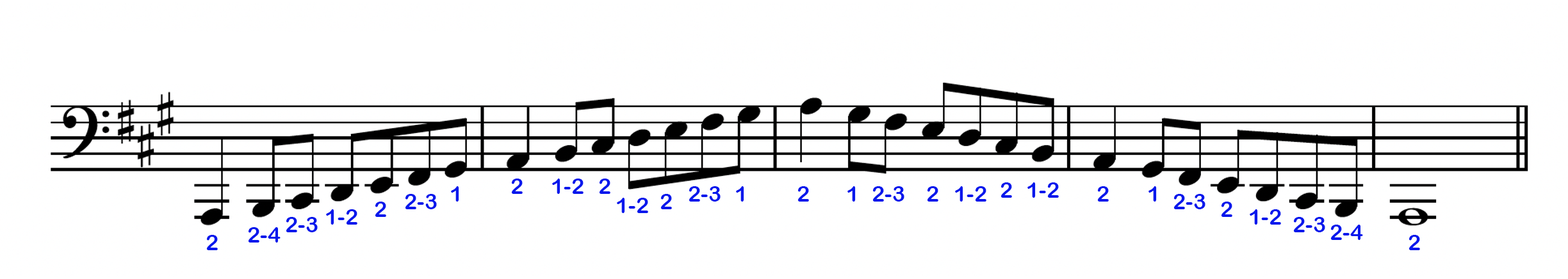
<style>
.page{position:relative;width:1568px;height:279px;background:#ffffff}
.page>*{position:absolute;margin:0}
.t1{font:21.8px "ArialRoundedMTBold";color:#0417ec}
</style>
<div class="page">
<p class="t1" style="left:511px;top:179px;width:12px;height:15px">2</p>
<p class="t1" style="left:552px;top:179px;width:32px;height:15px">1-2</p>
<p class="t1" style="left:599px;top:179px;width:11px;height:15px">2</p>
<p class="t1" style="left:1000px;top:183px;width:12px;height:15px">2</p>
<p class="t1" style="left:1027px;top:183px;width:32px;height:15px">1-2</p>
<p class="t1" style="left:405px;top:194px;width:32px;height:15px">2-3</p>
<p class="t1" style="left:451px;top:186px;width:8px;height:16px">1</p>
<p class="t1" style="left:617px;top:198px;width:31px;height:15px">1-2</p>
<p class="t1" style="left:660px;top:194px;width:12px;height:15px">2</p>
<p class="t1" style="left:689px;top:186px;width:32px;height:16px">2-3</p>
<p class="t1" style="left:736px;top:186px;width:8px;height:16px">1</p>
<p class="t1" style="left:797px;top:186px;width:12px;height:16px">2</p>
<p class="t1" style="left:847px;top:186px;width:9px;height:16px">1</p>
<p class="t1" style="left:872px;top:186px;width:32px;height:16px">2-3</p>
<p class="t1" style="left:927px;top:186px;width:11px;height:16px">2</p>
<p class="t1" style="left:955px;top:186px;width:31px;height:16px">1-2</p>
<p class="t1" style="left:1097px;top:186px;width:12px;height:16px">2</p>
<p class="t1" style="left:1148px;top:186px;width:9px;height:16px">1</p>
<p class="t1" style="left:1173px;top:194px;width:32px;height:15px">2-3</p>
<p class="t1" style="left:326px;top:209px;width:31px;height:16px">1-2</p>
<p class="t1" style="left:375px;top:202px;width:11px;height:15px">2</p>
<p class="t1" style="left:1221px;top:202px;width:11px;height:15px">2</p>
<p class="t1" style="left:1250px;top:209px;width:31px;height:16px">1-2</p>
<p class="t1" style="left:286px;top:217px;width:32px;height:16px">2-3</p>
<p class="t1" style="left:1293px;top:217px;width:32px;height:16px">2-3</p>
<p class="t1" style="left:248px;top:227px;width:33px;height:16px">2-4</p>
<p class="t1" style="left:1330px;top:225px;width:33px;height:15px">2-4</p>
<p class="t1" style="left:206px;top:235px;width:12px;height:15px">2</p>
<p class="t1" style="left:1409px;top:235px;width:11px;height:15px">2</p>
</div>
